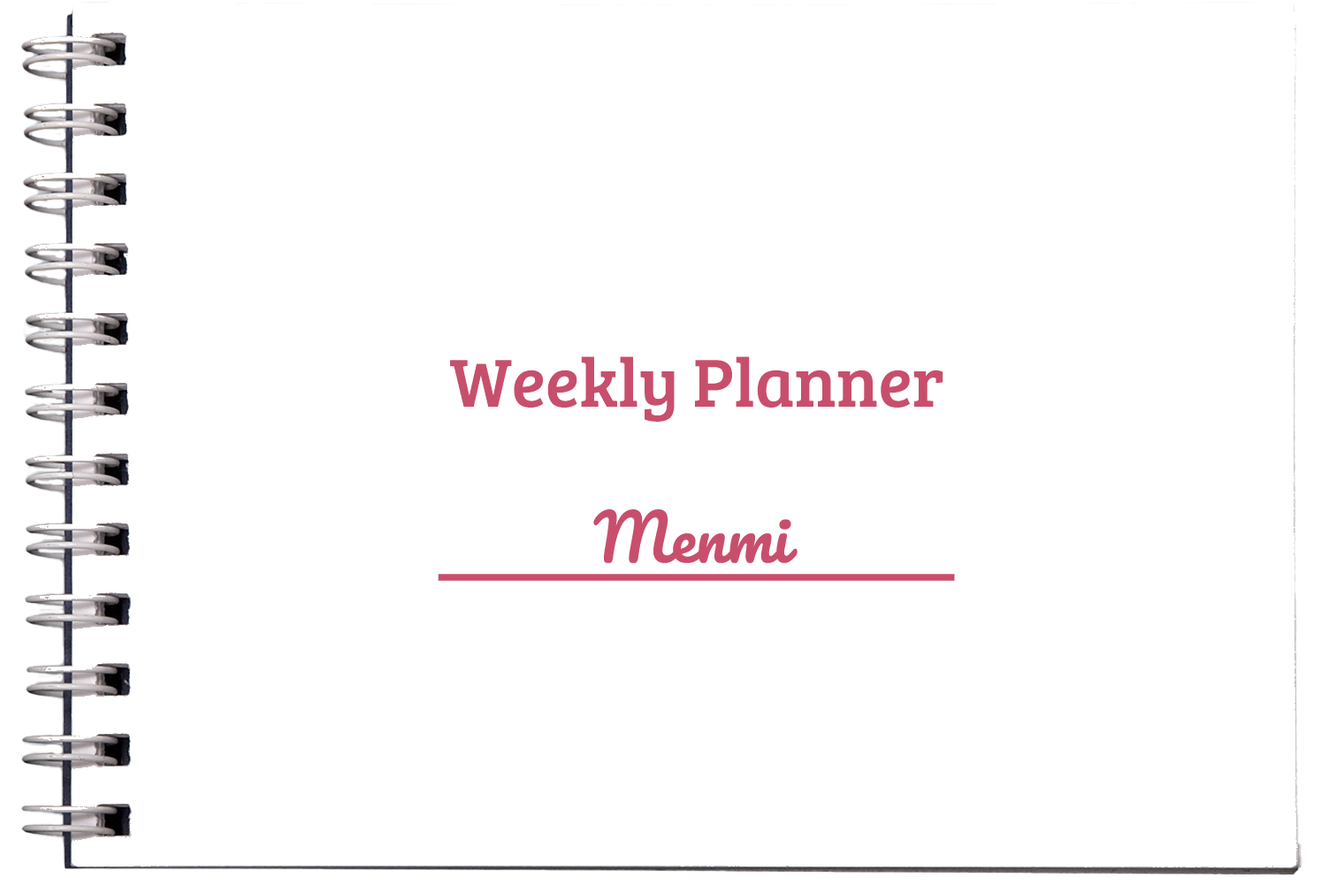
<style>
.page{position:relative;width:1336px;height:893px;background:#ffffff}
.page>*{position:absolute;margin:0}
.t1{font:69.8px "BreeSerif-Regular";color:#c84f6c}
.t2{font:62.8px "Pacifico-Regular";color:#c84f6c}
.t3{font:86.8px "BreeSerif-Regular";color:#c84f6c;scale:1.48 1}
</style>
<div class="page">
<p class="t1" style="left:450px;top:356px;width:493px;height:66px">Weekly Planner</p>
<p class="t2" style="left:593px;top:509px;width:204px;height:54px">Menmi</p>
<p class="t3" style="left:438px;top:574px;width:517px;height:7px">________</p>
</div>
